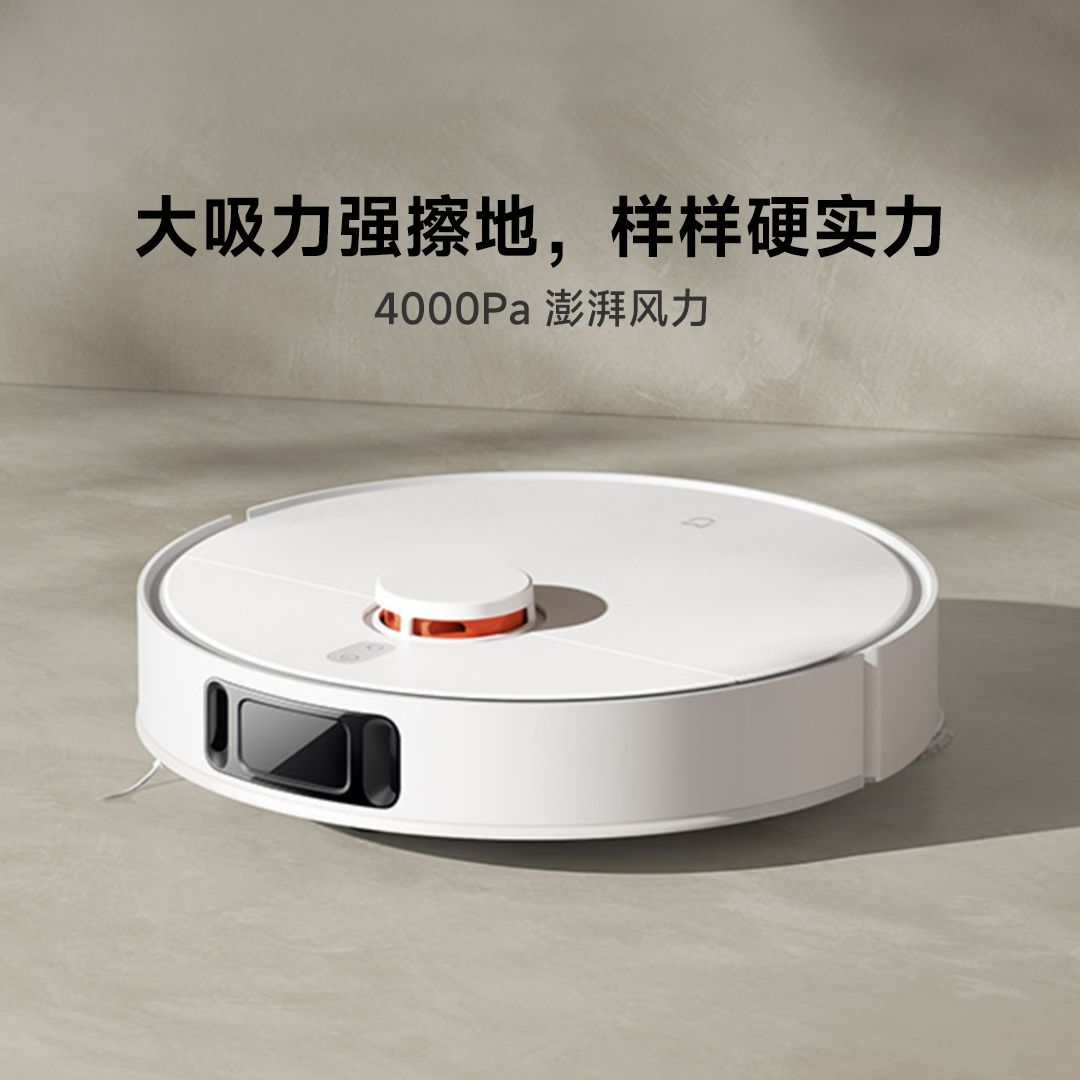
<style>
.page{position:relative;width:1080px;height:1080px}
.page>*{position:absolute;margin:0}
.t1{font:68px "MiSans-Semibold";color:#000000}
.t2{font:42px "MiSans-Medium";color:#333333}
</style>
<div class="page">
<p class="t1" style="left:135px;top:193px;width:806px;height:75px">大吸力强擦地，样样硬实力</p>
<p class="t2" style="left:374px;top:288px;width:333px;height:40px">4000Pa 澎湃风力</p>
</div>
